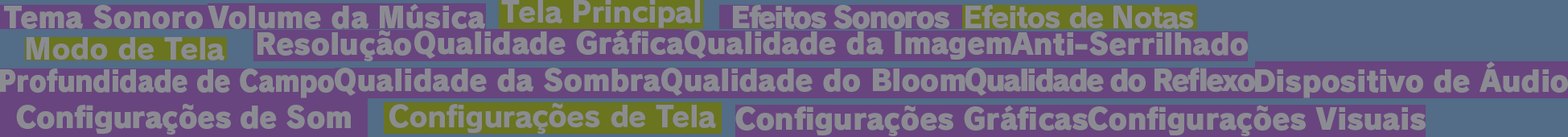
<style>
.page{position:relative;width:1568px;height:137px}
.page>*{position:absolute;margin:0}
.t1{font:29px "RodinPro-UB";letter-spacing:-0.018em;color:#8b8c92}
.t2{font:29px "RodinPro-EB";letter-spacing:-0.018em;color:#8b8c92}
.t3{font:29px "RodinPro-UB";letter-spacing:-0.08em;color:#8b8c92}
.t4{font:29px "RodinPro-EB";letter-spacing:-0.05em;color:#8b8c92}
.t5{font:29px "RodinPro-UB";letter-spacing:-0.02em;color:#8b8c92}
.t6{font:29px "RodinPro-UB";letter-spacing:-0.021em;color:#8b8c92}
.t7{font:29px "RodinPro-EB";letter-spacing:-0.016em;color:#8b8c92}
.t8{font:29px "RodinPro-UB";letter-spacing:-0.018em;color:#8b8c92;scale:0.92 1}
.t9{font:29px "RodinPro-UB";letter-spacing:-0.019em;color:#8b8c92}
.t10{font:29px "RodinPro-UB";letter-spacing:-0.023em;color:#8b8c92}
.t11{font:29px "RodinPro-EB";letter-spacing:-0.02em;color:#8b8c92}
</style>
<div class="page">
<p class="t1" style="left:4px;top:5px;width:199px;height:24px">Tema Sonoro</p>
<p class="t1" style="left:208px;top:3px;width:278px;height:26px">Volume da Música</p>
<p class="t2" style="left:501px;top:0px;width:199px;height:28px">Tela Principal</p>
<p class="t3" style="left:733px;top:5px;width:216px;height:24px">Efeitos Sonoros</p>
<p class="t4" style="left:965px;top:5px;width:229px;height:24px">Efeitos de Notas</p>
<p class="t5" style="left:257px;top:30px;width:154px;height:31px">Resolução</p>
<p class="t6" style="left:414px;top:29px;width:271px;height:30px">Qualidade Gráfica</p>
<p class="t7" style="left:27px;top:37px;width:197px;height:23px">Modo de Tela</p>
<p class="t5" style="left:685px;top:31px;width:326px;height:29px">Qualidade da Imagem</p>
<p class="t5" style="left:1011px;top:31px;width:237px;height:25px">Anti-Serrilhado</p>
<p class="t5" style="left:1255px;top:61px;width:313px;height:37px">Dispositivo de Áudio</p>
<p class="t8" style="left:0px;top:68px;width:334px;height:30px">Profundidade de Campo</p>
<p class="t9" style="left:335px;top:68px;width:326px;height:28px">Qualidade da Sombra</p>
<p class="t5" style="left:661px;top:68px;width:304px;height:28px">Qualidade do Bloom</p>
<p class="t3" style="left:965px;top:68px;width:290px;height:28px">Qualidade do Reflexo</p>
<p class="t10" style="left:16px;top:103px;width:335px;height:31px">Configurações de Som</p>
<p class="t11" style="left:389px;top:102px;width:327px;height:32px">Configurações de Tela</p>
<p class="t5" style="left:735px;top:105px;width:353px;height:31px">Configurações Gráficas</p>
<p class="t6" style="left:1088px;top:105px;width:338px;height:31px">Configurações Visuais</p>
</div>
